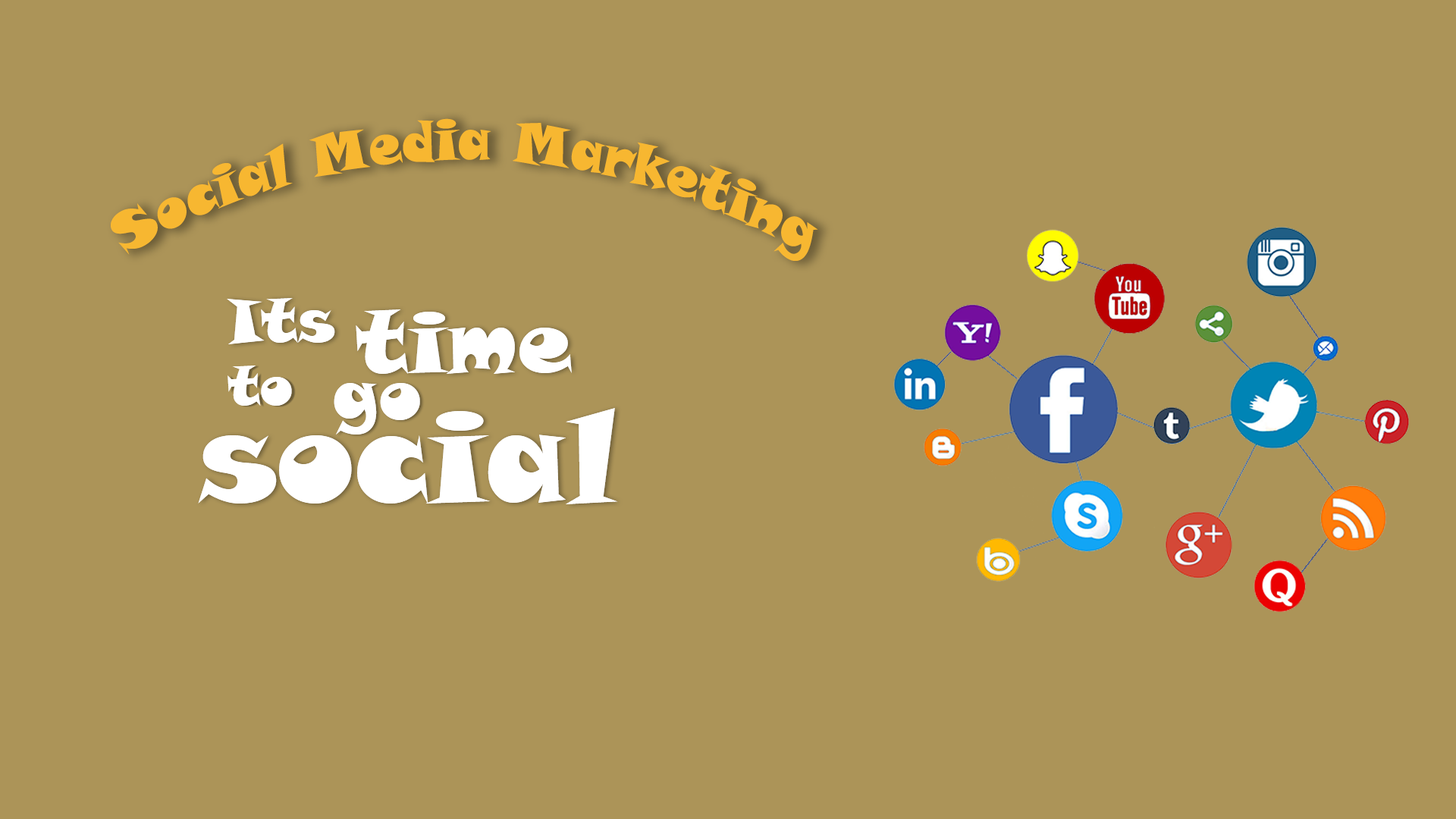
<style>
.page{position:relative;width:1456px;height:819px;background:#ac9458}
.page>*{position:absolute;margin:0}
.t1{font:56.8px/45.7px "SnapITC-Regular";color:#f7b731;scale:0.85 1}
.t2{font:60.3px "SnapITC-Regular";color:#ffffff}
.t3{font:86px "SnapITC-Regular";color:#ffffff}
.t4{font:54px "SnapITC-Regular";color:#ffffff}
.t5{font:69.7px "SnapITC-Regular";color:#ffffff}
.t6{font:127.9px "SnapITC-Regular";color:#ffffff}
</style>
<div class="page">
<p class="t1" style="left:111px;top:118px;width:707px;height:143px">Social Media Marketing</p>
<p class="t2" style="left:227px;top:298px;width:108px;height:46px">Its</p>
<p class="t3" style="left:356px;top:309px;width:216px;height:65px">time</p>
<p class="t4" style="left:227px;top:366px;width:65px;height:40px">to</p>
<p class="t5" style="left:334px;top:383px;width:86px;height:52px">go</p>
<p class="t6" style="left:198px;top:408px;width:420px;height:96px">social</p>
</div>
